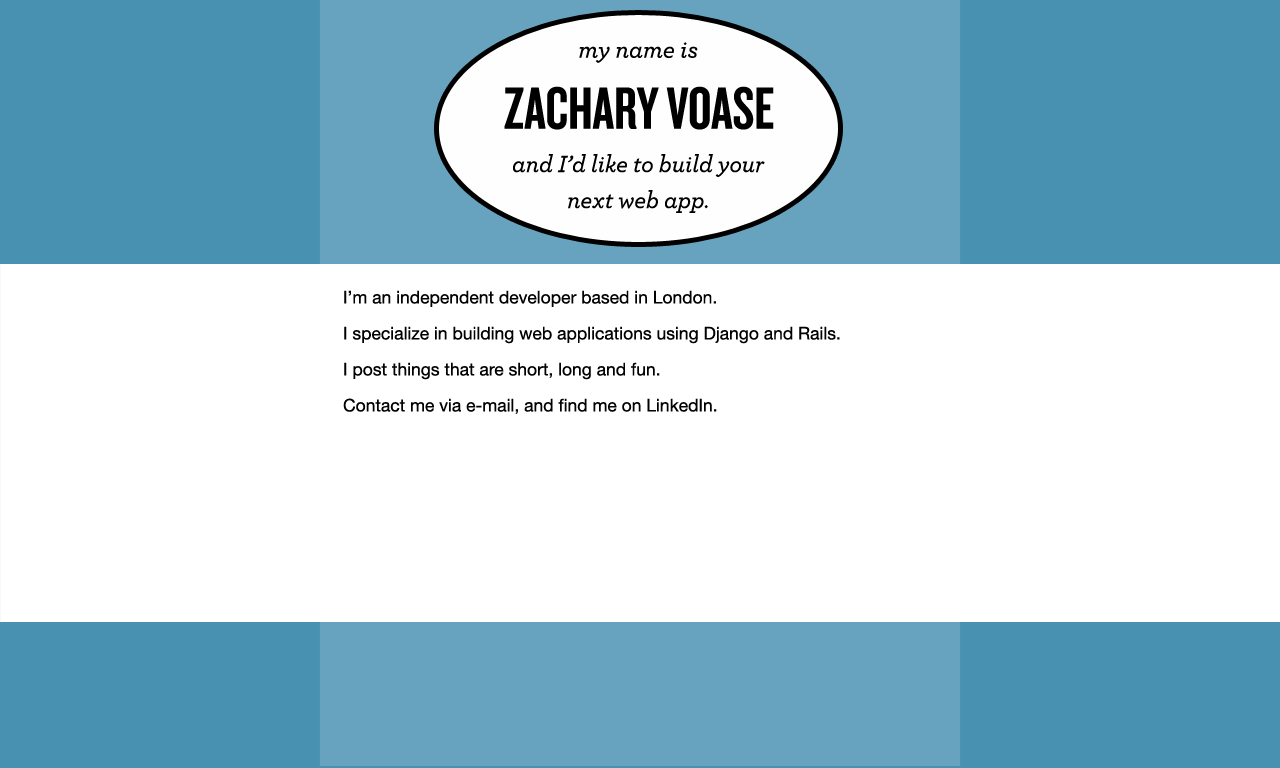
<style>
.page{position:relative;width:1280px;height:768px;background:#ffffff}
.page>*{position:absolute;margin:0}
.t1{font:43px "Archer-MediumItalic";color:#000000}
.t2{font:106px "Knockout-HTF48-Featherweight";color:#000000}
.t3{font:42px/36px "Archer-MediumItalic";color:#000000}
.t4{font:30px/36px "HelveticaNeue";color:#010101}
</style>
<div class="page">
<p class="t1" style="left:579px;top:42px;width:119px;height:21px">my name is</p>
<p class="t2" style="left:504px;top:86px;width:270px;height:44px">ZACHARY VOASE</p>
<p class="t3" style="left:513px;top:154px;width:252px;height:59px;text-align:center">and I’d like to build your<br>next web app.</p>
<p class="t4" style="left:343px;top:290px;width:497px;height:124px">I’m an independent developer based in London.<br>I specialize in building web applications using Django and Rails.<br>I post things that are short, long and fun.<br>Contact me via e-mail, and find me on LinkedIn.</p>
</div>
